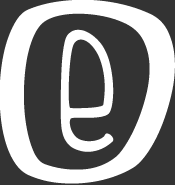
<style>
.page{position:relative;width:175px;height:185px;background:#333333}
.page>*{position:absolute;margin:0}
.t1{font:275.3px "FISHfingers";color:#ffffff;scale:1.84 1}
.t2{font:178px "FISHfingers";color:#ffffff}
</style>
<div class="page">
<p class="t1" style="left:0px;top:0px;width:175px;height:184px">o</p>
<p class="t2" style="left:60px;top:29px;width:54px;height:123px">e</p>
</div>
